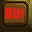
<style>
.page{position:relative;width:32px;height:32px}
.page>*{position:absolute;margin:0}
.t1{font:13.7px "28DaysLater";letter-spacing:0.08em;color:#ff1313;scale:0.96 1}
</style>
<div class="page">
<p class="t1" style="left:5px;top:7px;width:19px;height:12px">BUI</p>
</div>
